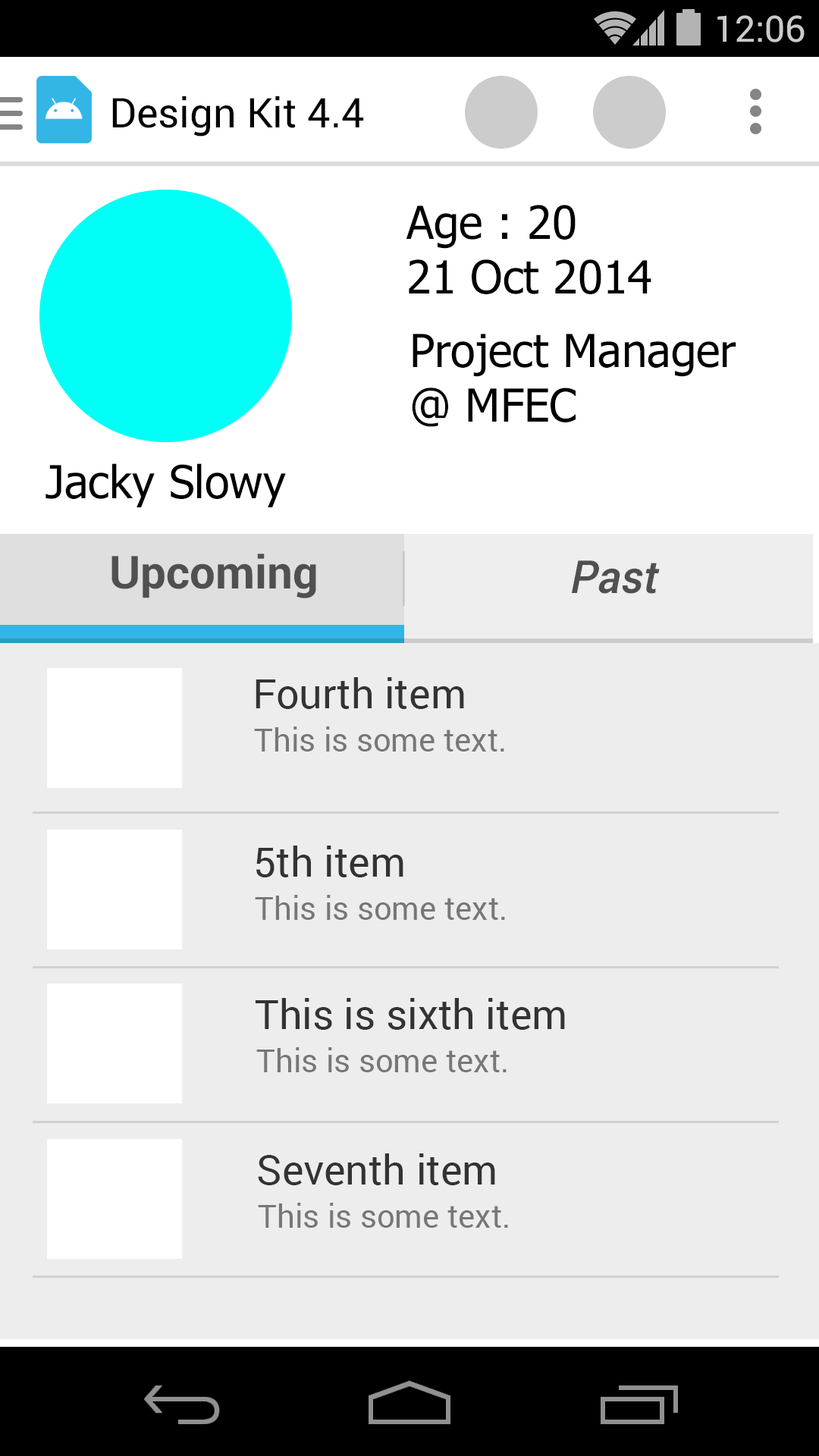
<style>
.page{position:relative;width:819px;height:1456px;background:#ededed}
.page>*{position:absolute;margin:0}
.t1{font:36.4px "Roboto-Regular";color:#cbcbcb}
.t2{font:40.9px "Roboto-Regular";color:#000000}
.t3{font:45.5px "Tahoma";color:#000000}
.t4{font:45.5px "Roboto-Bold";color:#505050}
.t5{font:45.5px "Roboto-MediumItalic";color:#505050}
.t6{font:40.9px "Roboto-Regular";color:#333333}
.t7{font:31.8px "Roboto-Regular";color:#777777}
</style>
<div class="page">
<p class="t1" style="left:717px;top:15px;width:88px;height:27px">12:06</p>
<p class="t2" style="left:112px;top:96px;width:252px;height:40px">Design Kit 4.4</p>
<p class="t3" style="left:406px;top:205px;width:245px;height:89px">Age : 20<br>21 Oct 2014</p>
<p class="t3" style="left:412px;top:334px;width:324px;height:93px">Project Manager <br>@ MFEC</p>
<p class="t3" style="left:45px;top:463px;width:241px;height:44px">Jacky Slowy</p>
<p class="t4" style="left:111px;top:554px;width:205px;height:44px">Upcoming</p>
<p class="t5" style="left:572px;top:560px;width:88px;height:34px">Past</p>
<p class="t6" style="left:256px;top:677px;width:208px;height:32px">Fourth item</p>
<p class="t7" style="left:254px;top:726px;width:250px;height:25px">This is some text.</p>
<p class="t6" style="left:256px;top:846px;width:147px;height:31px">5th item</p>
<p class="t7" style="left:255px;top:895px;width:250px;height:25px">This is some text.</p>
<p class="t6" style="left:255px;top:998px;width:310px;height:32px">This is sixth item</p>
<p class="t7" style="left:256px;top:1047px;width:251px;height:25px">This is some text.</p>
<p class="t6" style="left:258px;top:1153px;width:237px;height:32px">Seventh item</p>
<p class="t7" style="left:258px;top:1203px;width:250px;height:25px">This is some text.</p>
</div>
